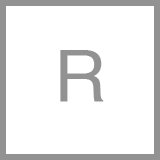
<style>
.page{position:relative;width:160px;height:160px;background:#ffffff}
.page>*{position:absolute;margin:0}
.t1{font:72px "Helvetica";color:#929292}
</style>
<div class="page">
<p class="t1" style="left:60px;top:50px;width:44px;height:52px">R</p>
</div>
